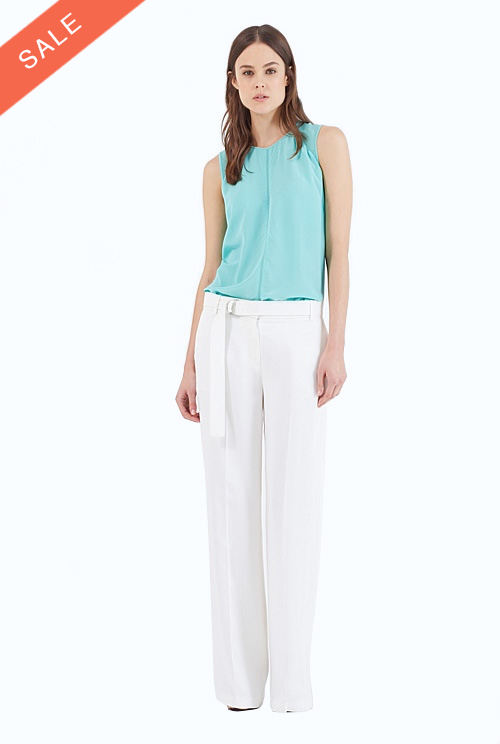
<style>
.page{position:relative;width:500px;height:744px;background:#f9fdff}
.page>*{position:absolute;margin:0}
.t1{font:25px "Helvetica";letter-spacing:0.1em;color:#ffffff}
</style>
<div class="page">
<p class="t1" style="left:19px;top:12px;width:63px;height:57px;rotate:-39deg">SALE</p>
</div>
